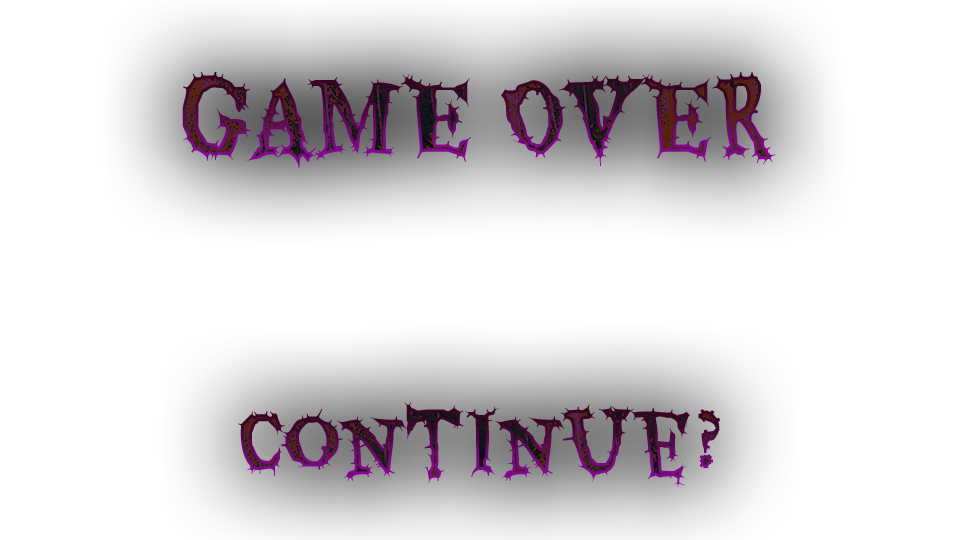
<style>
.page{position:relative;width:960px;height:540px;background:#ffffff}
.page>*{position:absolute;margin:0}
.t1{font:100px "Eater-Regular"}
.t2{font:80px "Eater-Regular"}
</style>
<div class="page">
<p class="t1" style="left:182px;top:72px;width:594px;height:96px">GAME OVER</p>
<p class="t2" style="left:238px;top:402px;width:483px;height:86px">Continue?</p>
</div>
